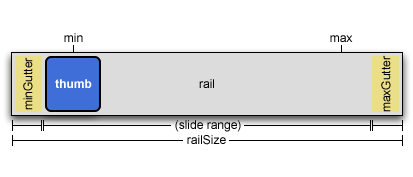
<style>
.page{position:relative;width:413px;height:177px;background:#ffffff}
.page>*{position:absolute;margin:0}
.t1{font:12px "ArialMT";color:#000001}
.t2{font:12px "ArialMT";color:#000000}
.t3{font:12px "Arial-BoldMT";color:#fffefe}
</style>
<div class="page">
<p class="t1" style="left:64px;top:33px;width:19px;height:9px">min</p>
<p class="t1" style="left:330px;top:35px;width:23px;height:7px">max</p>
<p class="t2" style="left:23px;top:57px;width:10px;height:53px;rotate:-90deg">minGutter</p>
<p class="t2" style="left:381px;top:55px;width:10px;height:57px;rotate:-90deg">maxGutter</p>
<p class="t3" style="left:55px;top:79px;width:37px;height:9px">thumb</p>
<p class="t2" style="left:199px;top:79px;width:15px;height:9px">rail</p>
<p class="t1" style="left:175px;top:120px;width:66px;height:12px">(slide range)</p>
<p class="t1" style="left:187px;top:135px;width:39px;height:10px">railSize</p>
</div>
